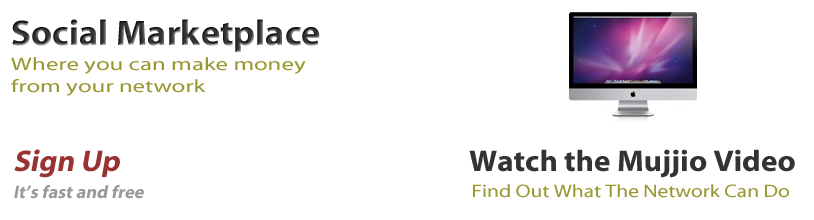
<style>
.page{position:relative;width:814px;height:220px;background:#ffffff}
.page>*{position:absolute;margin:0}
.t1{font:35.9px "MyriadWebPro-Bold";color:#333333}
.t2{font:17.9px "MyriadWebPro";color:#999933;scale:1.34 1}
.t3{font:29.9px "MyriadWebPro-Bold";color:#993333;font-style:italic}
.t4{font:29.9px "MyriadWebPro-Bold";color:#333333}
.t5{font:17.9px "MyriadWebPro-Bold";color:#999999;font-style:italic}
.t6{font:17.9px "MyriadWebPro";color:#999933;scale:1.15 1}
</style>
<div class="page">
<p class="t1" style="left:12px;top:19px;width:308px;height:33px">Social Marketplace</p>
<p class="t2" style="left:11px;top:57px;width:295px;height:39px">Where you can make money <br>from your network</p>
<p class="t3" style="left:14px;top:149px;width:106px;height:29px">Sign Up</p>
<p class="t4" style="left:469px;top:149px;width:326px;height:29px">Watch the Mujjio Video</p>
<p class="t5" style="left:14px;top:185px;width:130px;height:14px">It’s fast and free</p>
<p class="t6" style="left:473px;top:184px;width:316px;height:14px">Find Out What The Network Can Do</p>
</div>
